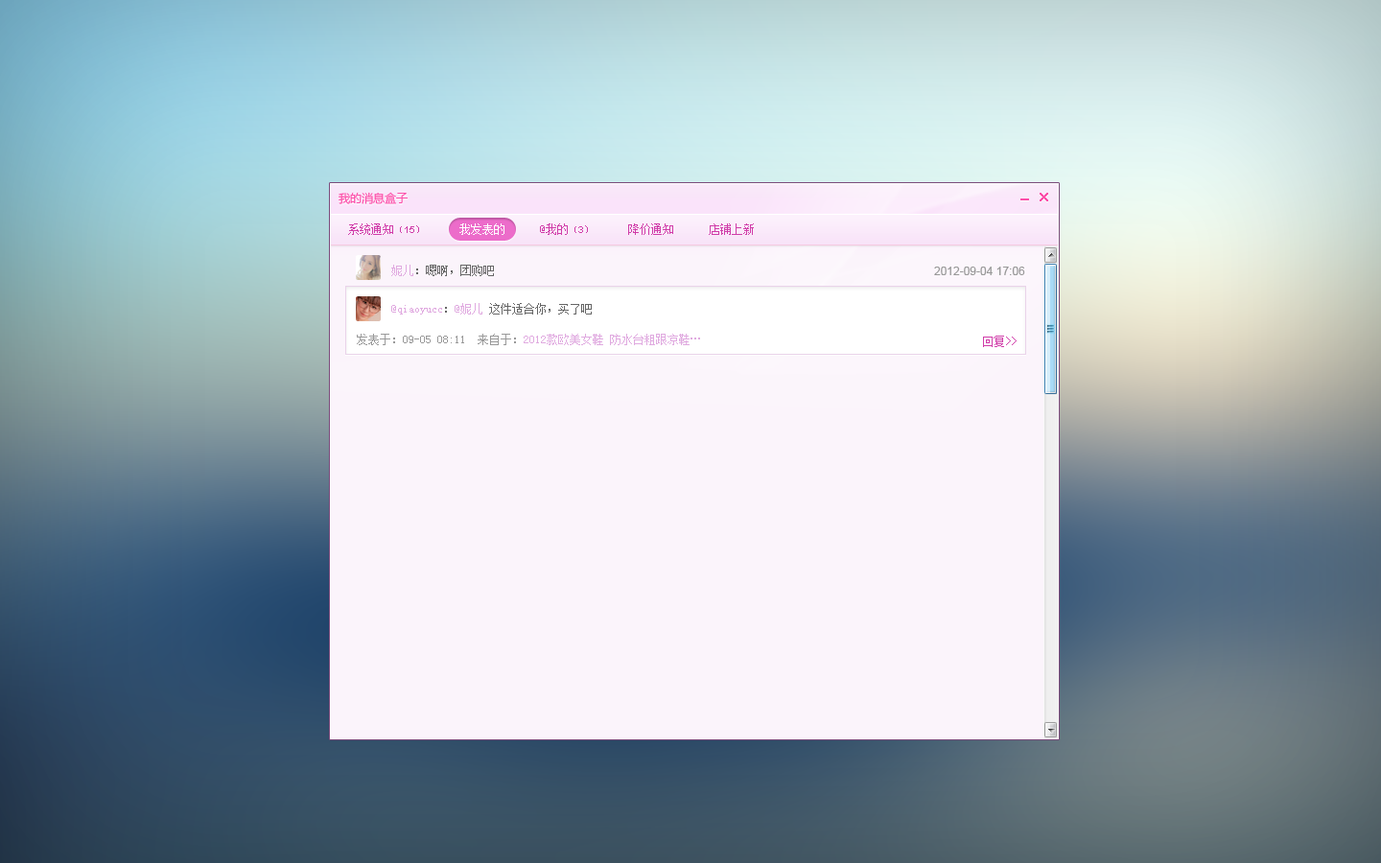
<style>
.page{position:relative;width:1381px;height:863px;background:#fbf4fb}
.page>*{position:absolute;margin:0}
.t1{font:11.5px "MicrosoftYaHei";color:#fc4ea9}
.t2{font:11.5px "SimSun";color:#d03da9}
.t3{font:9.6px "SimSun";color:#d03da9}
.t4{font:9.6px "ArialMT";color:#d03da9}
.t5{font:11.5px "SimSun";color:#ffffff}
.t6{font:11.5px "SimSun";color:#666666}
.t7{font:11.5px "SimSun";color:#e0aae0}
.t8{font:11.5px "ArialMT";color:#999999}
.t9{font:11.5px "SimSun";color:#999999}
</style>
<div class="page">
<p class="t1" style="left:339px;top:192px;width:69px;height:12px">我的消息盒子</p>
<p class="t2" style="left:348px;top:223px;width:406px;height:12px">系统通知<span class="t3">（</span><span class="t4">15</span><span class="t3">）　　　</span><span class="t5">我发表的</span>　　　@我的<span class="t3">（</span><span class="t4">3</span><span class="t3">）</span>　　　降价通知　　　店铺上新</p>
<p class="t6" style="left:391px;top:265px;width:103px;height:11px"><span class="t7">妮儿</span>：嗯啊，团购吧</p>
<p class="t8" style="left:934px;top:267px;width:91px;height:8px">2012-09-04 17:06</p>
<p class="t7" style="left:391px;top:303px;width:201px;height:12px">@qiaoyucc<span class="t6">：</span>@妮儿<span class="t6"> 这件适合你，买了吧</span></p>
<p class="t9" style="left:357px;top:334px;width:343px;height:11px">发表于：09-05 08:11  来自于：<span class="t7">2012款欧美女鞋 防水台粗跟凉鞋…</span></p>
<p class="t2" style="left:983px;top:336px;width:34px;height:11px">回复&gt;&gt;</p>
</div>
